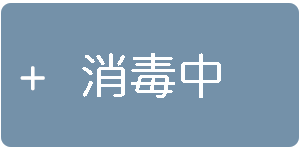
<style>
.page{position:relative;width:300px;height:150px;background:#7491a9}
.page>*{position:absolute;margin:0}
.t1{font:48px "HiraMaruPro-W4";color:#feffff}
.t2{font:42px "HiraMaruPro-W4";letter-spacing:0.2em;color:#ffffff}
</style>
<div class="page">
<p class="t1" style="left:82px;top:53px;width:139px;height:45px">消毒中</p>
<p class="t2" style="left:20px;top:66px;width:25px;height:25px">+</p>
</div>
